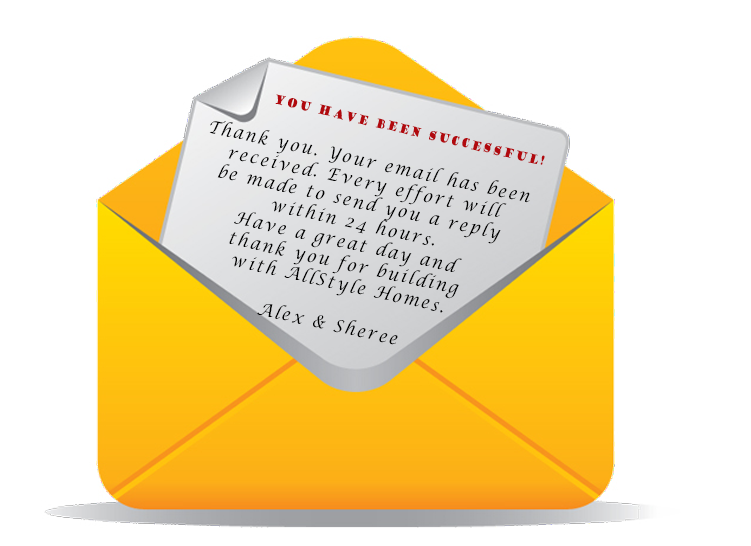
<style>
.page{position:relative;width:751px;height:546px;background:#ffffff}
.page>*{position:absolute;margin:0}
.t1{font:12.4px "GoudyStout";letter-spacing:0.15em;color:#b1090e;scale:0.74 1}
.t2{font:17.4px "LucidaCalligraphy-Italic";letter-spacing:0.15em;color:#000000;scale:0.89 1}
</style>
<div class="page">
<p class="t1" style="left:275px;top:94px;width:270px;height:71px;rotate:13deg">You Have Been Successful!</p>
<p class="t2" style="left:209px;top:121px;width:321px;height:224px;text-align:center;rotate:12deg">Thank you. Your email has been<br>received. Every effort will<br>be made to send you a reply<br>within 24 hours.<br>Have a great day and <br>thank you for building<br>with AllStyle Homes.<br><br>Alex &amp; Sheree</p>
</div>
